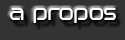
<style>
.page{position:relative;width:125px;height:40px;background:#333333}
.page>*{position:absolute;margin:0}
.t1{font:20px "BirdmanBold";color:#ffffff}
</style>
<div class="page">
<p class="t1" style="left:10px;top:8px;width:106px;height:15px">A propos</p>
</div>
